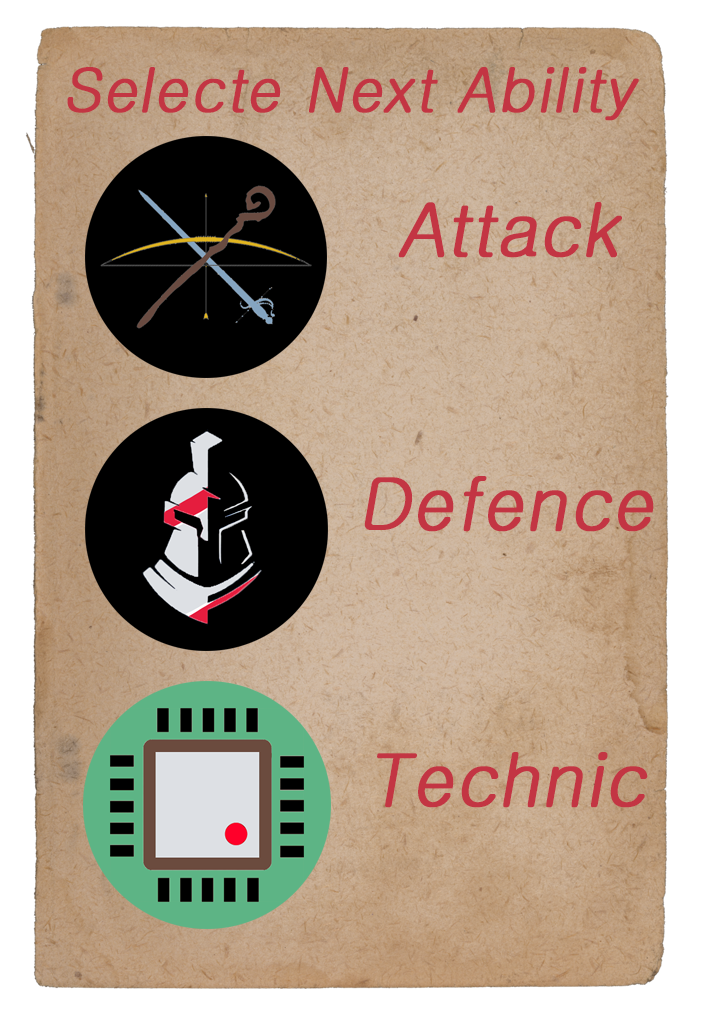
<style>
.page{position:relative;width:704px;height:1024px}
.page>*{position:absolute;margin:0}
.t1{font:60px "Gulim";color:#c33543;font-weight:bold;font-style:italic}
.t2{font:72px "Gulim";color:#c33543;font-weight:bold;font-style:italic}
</style>
<div class="page">
<p class="t1" style="left:67px;top:67px;width:572px;height:54px">Selecte Next Ability</p>
<p class="t2" style="left:398px;top:202px;width:224px;height:56px">Attack</p>
<p class="t2" style="left:364px;top:476px;width:290px;height:56px">Defence</p>
<p class="t2" style="left:377px;top:752px;width:271px;height:56px">Technic</p>
</div>
